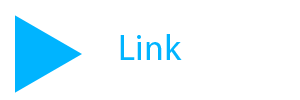
<style>
.page{position:relative;width:300px;height:100px;background:#ffffff}
.page>*{position:absolute;margin:0}
.t1{font:36px "MyriadPro-Regular";color:#00b4ff}
</style>
<div class="page">
<p class="t1" style="left:120px;top:34px;width:62px;height:26px">Link</p>
</div>
